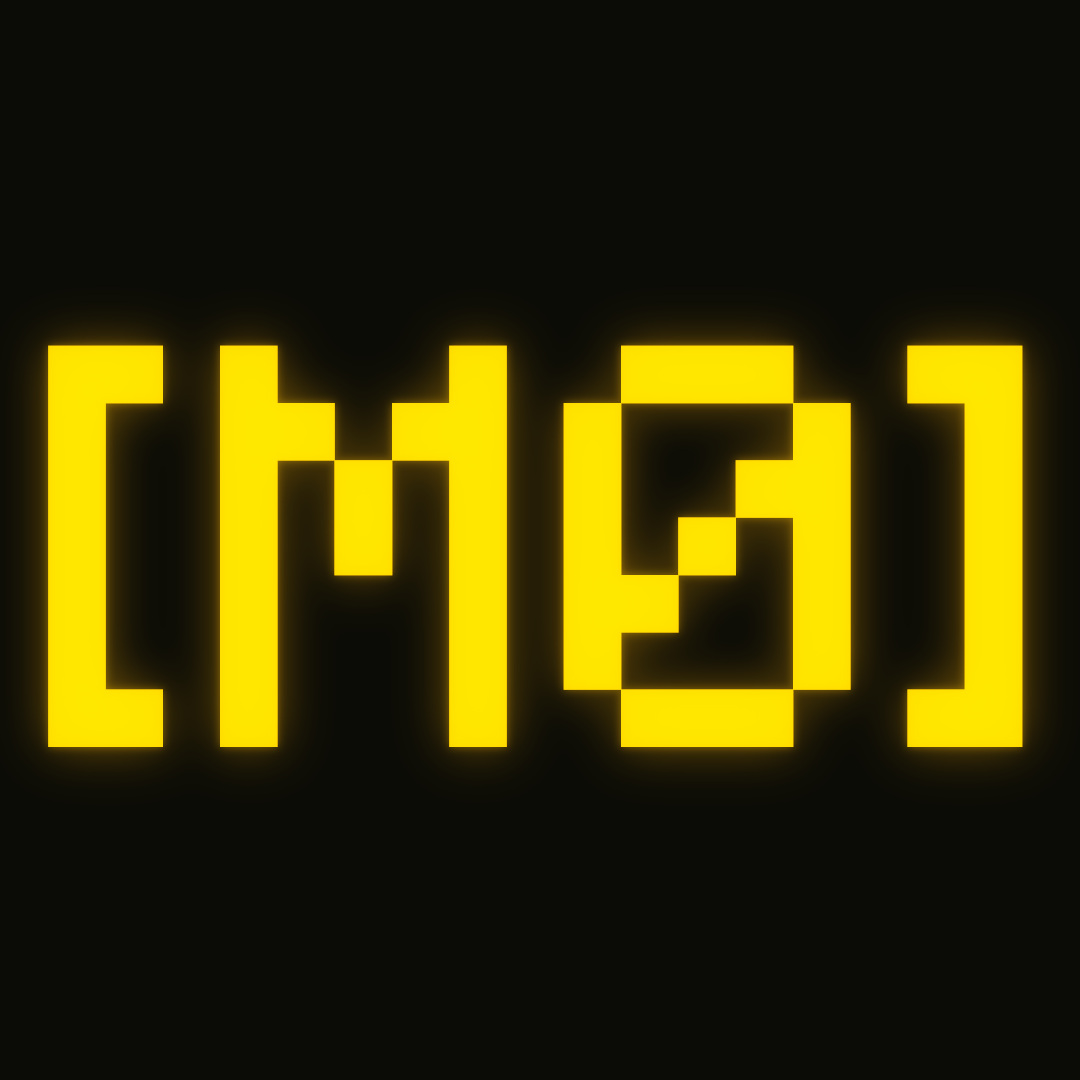
<style>
.page{position:relative;width:1080px;height:1080px;background:#0c0c06}
.page>*{position:absolute;margin:0}
.t1{font:458.3px "RosesareFF0000";color:#ffe600}
</style>
<div class="page">
<p class="t1" style="left:48px;top:345px;width:975px;height:402px">[M0]</p>
<p class="t1" style="left:48px;top:345px;width:975px;height:402px">[M0]</p>
</div>
